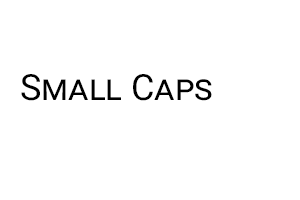
<style>
.page{position:relative;width:300px;height:200px;background:#ffffff}
.page>*{position:absolute;margin:0}
.t1{font:36px "Roboto-Regular";color:#000000;font-variant:small-caps}
</style>
<div class="page">
<p class="t1" style="left:21px;top:74px;width:191px;height:27px">Small Caps</p>
</div>
